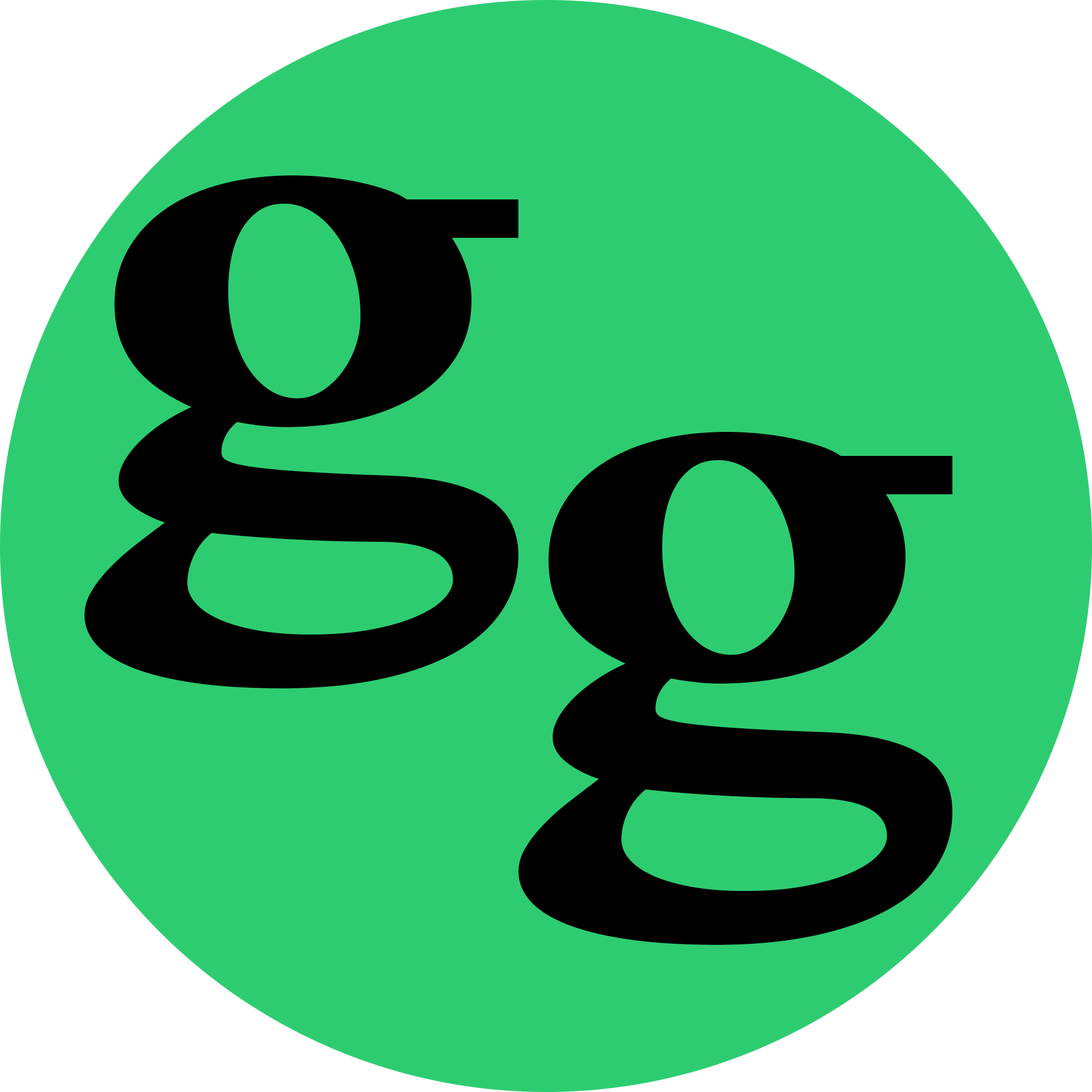
<style>
.page{position:relative;width:1092px;height:1092px;background:#2ecc71}
.page>*{position:absolute;margin:0}
.t1{font:691px "BanglaMN-Bold";color:#000000}
</style>
<div class="page">
<p class="t1" style="left:84px;top:175px;width:435px;height:513px">g</p>
<p class="t1" style="left:518px;top:432px;width:435px;height:513px">g</p>
</div>
